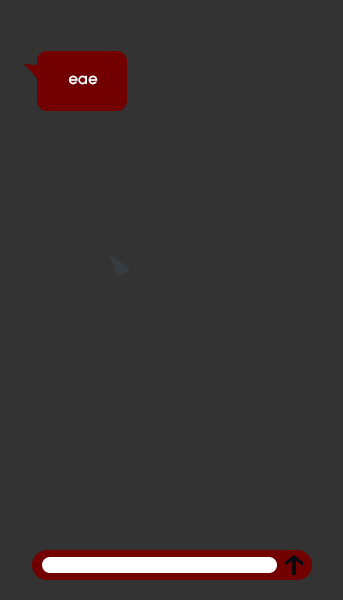
<style>
.page{position:relative;width:343px;height:600px;background:#333333}
.page>*{position:absolute;margin:0}
.t1{font:18px "Arcon-Regular";letter-spacing:-0.004em;color:#ffffff}
</style>
<div class="page">
<p class="t1" style="left:69px;top:75px;width:29px;height:10px">eae</p>
</div>
